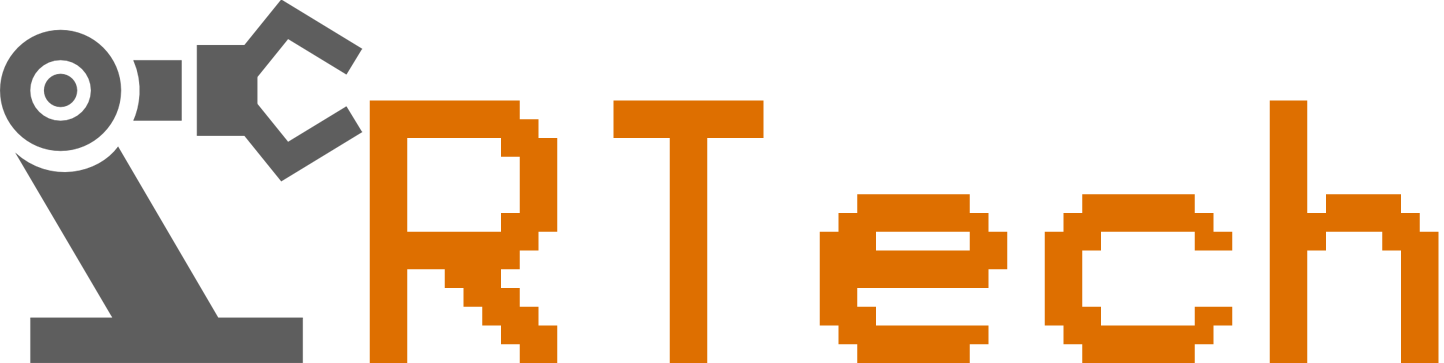
<style>
.page{position:relative;width:1444px;height:363px;background:#ffffff}
.page>*{position:absolute;margin:0}
.t1{font:300px "Terminal";color:#de6f00}
</style>
<div class="page">
<p class="t1" style="left:369px;top:100px;width:1070px;height:263px">RTech</p>
</div>
